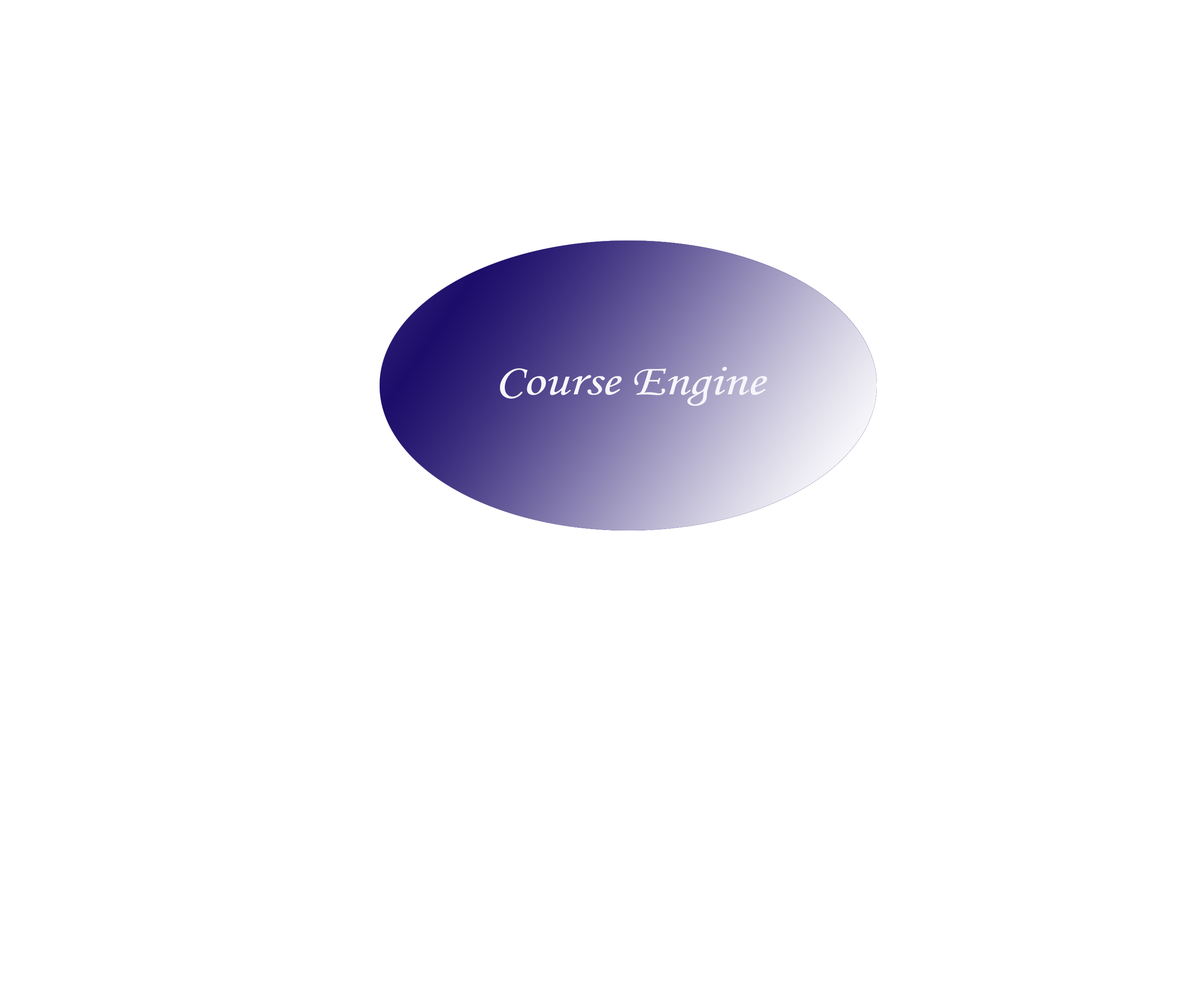
<style>
.page{position:relative;width:1202px;height:992px;background:#ffffff}
.page>*{position:absolute;margin:0}
.t1{font:44.2px "MonotypeCorsiva";color:#f6f5fa;scale:1.2 1}
</style>
<div class="page">
<p class="t1" style="left:500px;top:367px;width:267px;height:39px">Course Engine</p>
</div>
